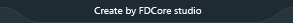
<style>
.page{position:relative;width:293px;height:23px;background:#1f2b33}
.page>*{position:absolute;margin:0}
.t1{font:10px "SegoeUI";color:#ffffff}
</style>
<div class="page">
<p class="t1" style="left:94px;top:7px;width:108px;height:9px;text-align:center">Create by FDCore studio<br>studio</p>
</div>
